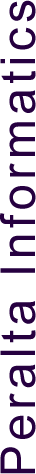
<style>
.page{position:relative;width:36px;height:474px;background:#ffffff}
.page>*{position:absolute;margin:0}
.t1{font:48px "ArialMT";letter-spacing:0.09em;color:#260040}
</style>
<div class="page">
<p class="t1" style="left:0px;top:0px;width:36px;height:474px;rotate:-90deg">Peralta Informatics</p>
</div>
